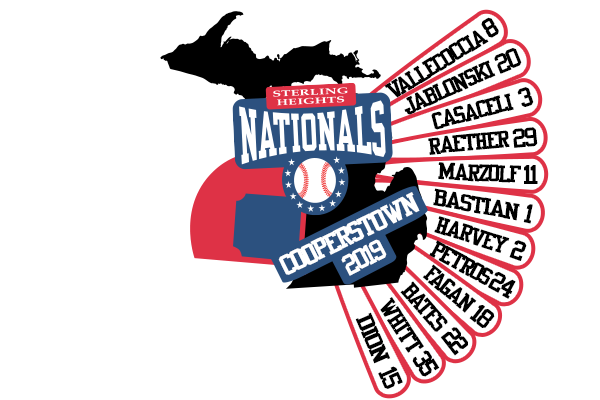
<style>
.page{position:relative;width:600px;height:400px;background:#ffffff}
.page>*{position:absolute;margin:0}
.t1{font:23.6px "NFLVikings";letter-spacing:-0.085em;color:#000000;scale:1.06 1}
.t2{font:20.8px "NFLVikings";letter-spacing:-0.085em;color:#000000;scale:1.22 1}
.t3{font:25px "NFLVikings";letter-spacing:-0.085em;color:#ffffff;scale:1.22 1}
.t4{font:20.8px "NFLVikings";letter-spacing:-0.085em;color:#000000;scale:1.35 1}
.t5{font:25.2px "NFLVikings";letter-spacing:-0.085em;color:#ffffff}
.t6{font:20.8px "NFLVikings";letter-spacing:-0.085em;color:#000000;scale:1.48 1}
.t7{font:23.6px "NFLVikings";letter-spacing:-0.085em;color:#000000}
</style>
<div class="page">
<p class="t1" style="left:481px;top:17px;width:18px;height:21px;rotate:-31deg">8</p>
<p class="t2" style="left:384px;top:30px;width:105px;height:68px;rotate:-32deg">Vallecoccia</p>
<p class="t1" style="left:494px;top:48px;width:28px;height:26px;rotate:-22deg">20</p>
<p class="t2" style="left:404px;top:60px;width:92px;height:55px;rotate:-24deg">Jablonski</p>
<p class="t1" style="left:517px;top:87px;width:17px;height:20px;rotate:-18deg">3</p>
<p class="t2" style="left:431px;top:93px;width:83px;height:37px;rotate:-15deg">Casaceli</p>
<p class="t2" style="left:428px;top:130px;width:82px;height:25px;rotate:-6deg">Raether</p>
<p class="t1" style="left:512px;top:127px;width:26px;height:21px;rotate:-6deg">29</p>
<p class="t2" style="left:438px;top:162px;width:84px;height:21px;rotate:2deg">Marzolf</p>
<p class="t1" style="left:524px;top:165px;width:14px;height:19px">11</p>
<p class="t3" style="left:278px;top:192px;width:142px;height:83px;rotate:-26deg">Cooperstown</p>
<p class="t4" style="left:433px;top:188px;width:87px;height:33px;rotate:10deg">Bastian</p>
<p class="t1" style="left:523px;top:204px;width:10px;height:20px;rotate:12deg">1</p>
<p class="t2" style="left:434px;top:216px;width:76px;height:37px;rotate:18deg">Harvey</p>
<p class="t5" style="left:341px;top:239px;width:46px;height:37px;rotate:-27deg">2019</p>
<p class="t2" style="left:429px;top:240px;width:65px;height:45px;rotate:28deg">Petros</p>
<p class="t1" style="left:509px;top:240px;width:18px;height:21px;rotate:20deg">2</p>
<p class="t2" style="left:422px;top:264px;width:55px;height:49px;rotate:40deg">Fagan</p>
<p class="t2" style="left:400px;top:281px;width:48px;height:51px;rotate:49deg">Bates</p>
<p class="t1" style="left:488px;top:272px;width:28px;height:27px;rotate:29deg">24</p>
<p class="t2" style="left:380px;top:297px;width:44px;height:56px;rotate:56deg">Whitt</p>
<p class="t1" style="left:469px;top:305px;width:26px;height:23px;rotate:38deg">18</p>
<p class="t6" style="left:355px;top:312px;width:36px;height:52px;rotate:66deg">Dion</p>
<p class="t1" style="left:440px;top:327px;width:28px;height:29px;rotate:52deg">22</p>
<p class="t7" style="left:412px;top:350px;width:28px;height:27px;rotate:58deg">35</p>
<p class="t1" style="left:378px;top:366px;width:25px;height:23px;rotate:66deg">15</p>
</div>
